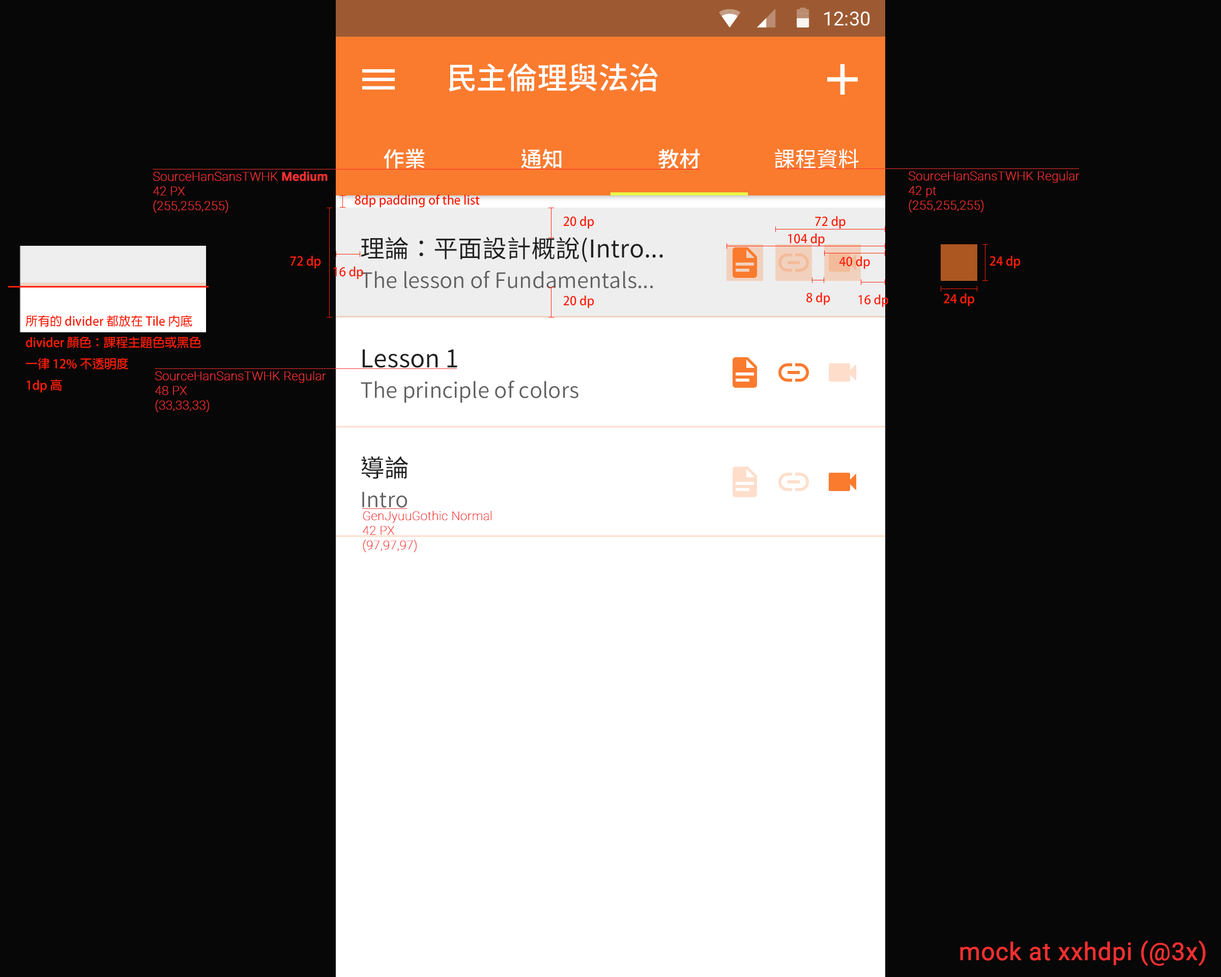
<style>
.page{position:relative;width:1221px;height:977px;background:#070707}
.page>*{position:absolute;margin:0}
.t1{font:19.4px "Roboto-Regular";color:#ffffff}
.t2{font:30.5px "SourceHanSansTWHK-Medium";color:#ffffff}
.t3{font:21.4px "SourceHanSansTWHK-Medium";color:#ffffff}
.t4{font:21.4px "SourceHanSansTWHK-Regular";color:#ffffff}
.t5{font:12.2px "Roboto-Thin";color:#f83030;font-weight:bold}
.t6{font:12.2px "Roboto-Medium";color:#f83030;font-weight:bold}
.t7{font:12.2px "AdobeFanHeitiStd-Bold";color:#ff1e07}
.t8{font:24.4px "SourceHanSansTWHK-Regular";color:#212121}
.t9{font:21.4px "GenJyuuGothic-Normal";color:#616161}
.t10{font:24.4px "Roboto-Regular";color:#f83030;font-weight:bold}
</style>
<div class="page">
<p class="t1" style="left:824px;top:11px;width:46px;height:15px">12:30</p>
<p class="t2" style="left:449px;top:63px;width:209px;height:29px">民主倫理與法治</p>
<p class="t3" style="left:384px;top:149px;width:41px;height:20px">作業</p>
<p class="t3" style="left:521px;top:149px;width:41px;height:20px">通知</p>
<p class="t3" style="left:658px;top:149px;width:42px;height:20px">教材</p>
<p class="t4" style="left:774px;top:149px;width:85px;height:20px">課程資料</p>
<p class="t5" style="left:153px;top:171px;width:175px;height:42px">SourceHanSansTWHK <span class="t6">Medium<br></span>42 PX<br>(255,255,255)</p>
<p class="t5" style="left:909px;top:171px;width:170px;height:42px">SourceHanSansTWHK Regular<br>42 pt<br>(255,255,255)</p>
<p class="t7" style="left:355px;top:194px;width:125px;height:14px">8dp padding of the list</p>
<p class="t7" style="left:563px;top:216px;width:31px;height:13px">20 dp</p>
<p class="t7" style="left:815px;top:216px;width:30px;height:13px">72 dp</p>
<p class="t7" style="left:788px;top:233px;width:37px;height:13px">104 dp</p>
<p class="t8" style="left:361px;top:237px;width:302px;height:25px">理論：平面設計概說(Intro...</p>
<p class="t7" style="left:290px;top:255px;width:31px;height:14px">72 dp</p>
<p class="t7" style="left:839px;top:256px;width:31px;height:13px">40 dp</p>
<p class="t7" style="left:989px;top:255px;width:31px;height:14px">24 dp</p>
<p class="t7" style="left:333px;top:266px;width:30px;height:13px">16 dp</p>
<p class="t9" style="left:361px;top:271px;width:292px;height:17px">The lesson of Fundamentals...</p>
<p class="t7" style="left:806px;top:292px;width:24px;height:13px">8 dp</p>
<p class="t7" style="left:944px;top:293px;width:30px;height:13px">24 dp</p>
<p class="t7" style="left:563px;top:295px;width:31px;height:13px">20 dp</p>
<p class="t7" style="left:858px;top:294px;width:30px;height:13px">16 dp</p>
<p class="t7" style="left:25px;top:315px;width:176px;height:78px">所有的 divider 都放在 Tile 內底<br>divider 顏色：課程主題色或黑色<br>一律 12% 不透明度<br>1dp高</p>
<p class="t8" style="left:362px;top:349px;width:95px;height:19px">Lesson 1</p>
<p class="t5" style="left:155px;top:371px;width:171px;height:42px">SourceHanSansTWHK Regular<br>48 PX<br>(33,33,33)</p>
<p class="t9" style="left:361px;top:381px;width:217px;height:22px">The principle of colors</p>
<p class="t8" style="left:361px;top:456px;width:47px;height:23px">導論</p>
<p class="t9" style="left:362px;top:491px;width:45px;height:17px">Intro</p>
<p class="t5" style="left:363px;top:511px;width:128px;height:41px">GenJyuuGothic Normal<br>42 PX<br>(97,97,97)</p>
<p class="t10" style="left:960px;top:940px;width:246px;height:26px">mock at xxhdpi (@3x)</p>
</div>
